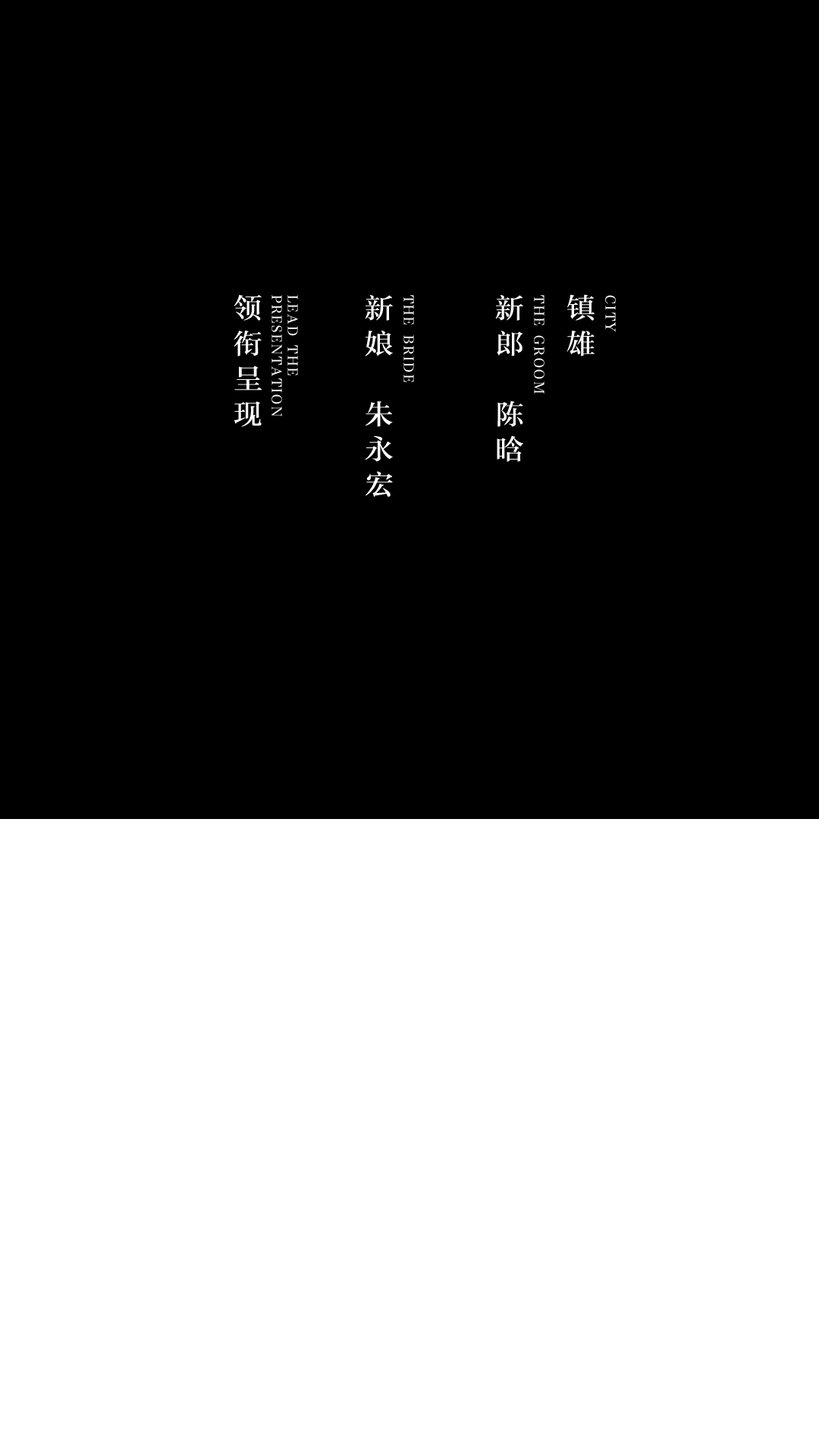
<style>
.page{position:relative;width:819px;height:1456px;background:#000000}
.page>*{position:absolute;margin:0}
.t1{font:28.4px/35.3px "FZZYSK--GBK1-0";letter-spacing:0.12em;color:#ffffff;text-transform:uppercase}
.t2{font:12.6px/15.8px "FZZYSK--GBK1-0";letter-spacing:0.12em;color:#ffffff;text-transform:uppercase}
.t3{font:12.6px "FZZYSK--GBK1-0";letter-spacing:0.12em;color:#ffffff;text-transform:uppercase}
</style>
<div class="page">
<p class="t1" style="left:234px;top:294px;width:28px;height:133px;text-align:center">领<br>衔<br>呈<br>现</p>
<p class="t2" style="left:271px;top:295px;width:27px;height:121px;rotate:90deg">lead the <br>presentation</p>
<p class="t1" style="left:365px;top:295px;width:28px;height:202px;text-align:center">新<br>娘<br><br>朱<br>永<br>宏</p>
<p class="t3" style="left:403px;top:295px;width:11px;height:87px;rotate:90deg">THE BRIDE</p>
<p class="t1" style="left:495px;top:295px;width:28px;height:167px;text-align:center">新<br>郎<br><br>陈<br>晗</p>
<p class="t3" style="left:533px;top:295px;width:11px;height:99px;rotate:90deg">THE GROOM</p>
<p class="t1" style="left:566px;top:294px;width:29px;height:62px;text-align:center">镇<br>雄</p>
<p class="t3" style="left:605px;top:295px;width:11px;height:37px;rotate:90deg">CITY</p>
</div>
